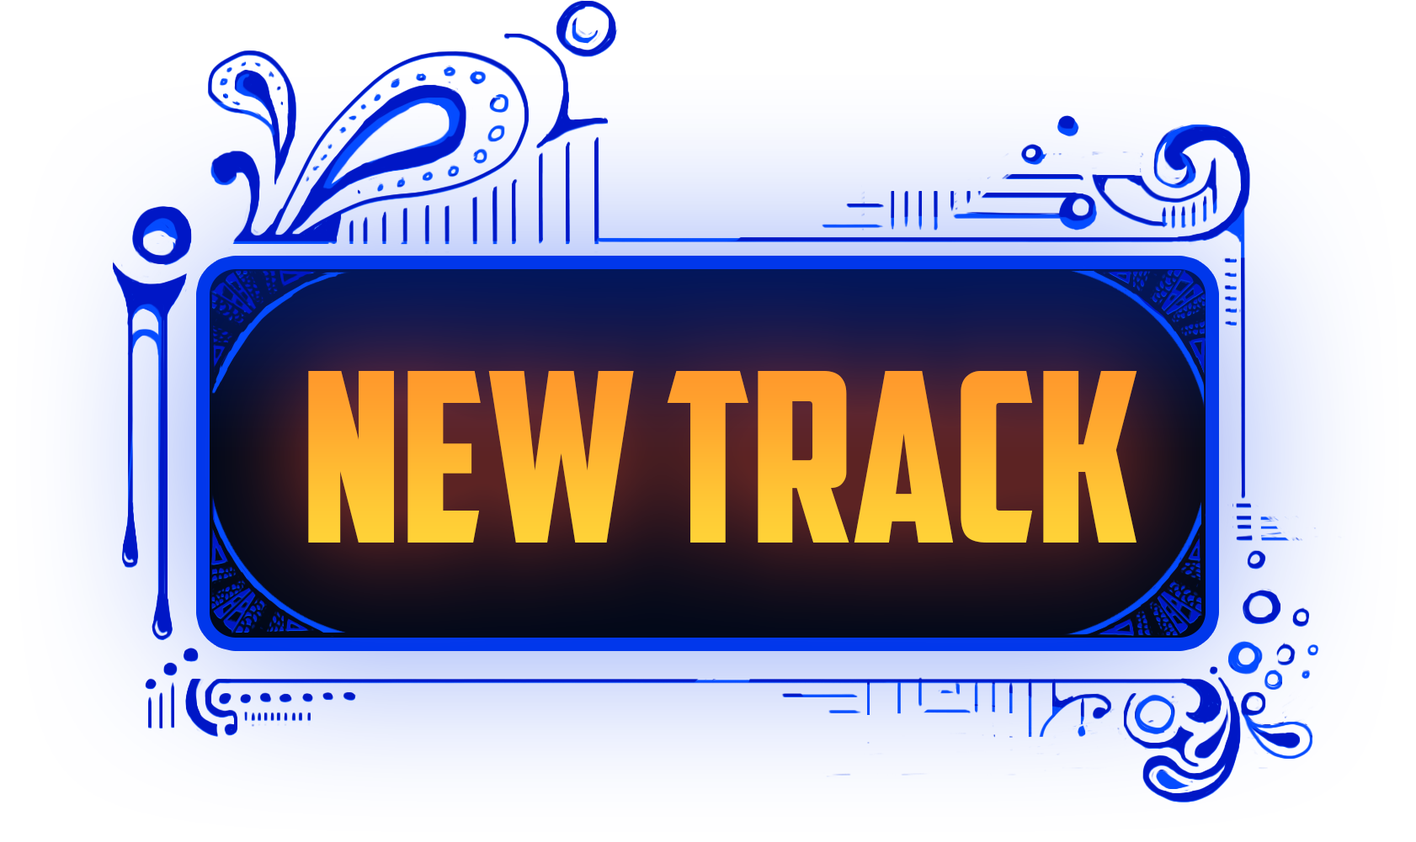
<style>
.page{position:relative;width:1416px;height:842px}
.page>*{position:absolute;margin:0}
.t1{font:236.3px "AmericanCaptain"}
</style>
<div class="page">
<p class="t1" style="left:308px;top:371px;width:829px;height:172px">NEW TRACK</p>
</div>
